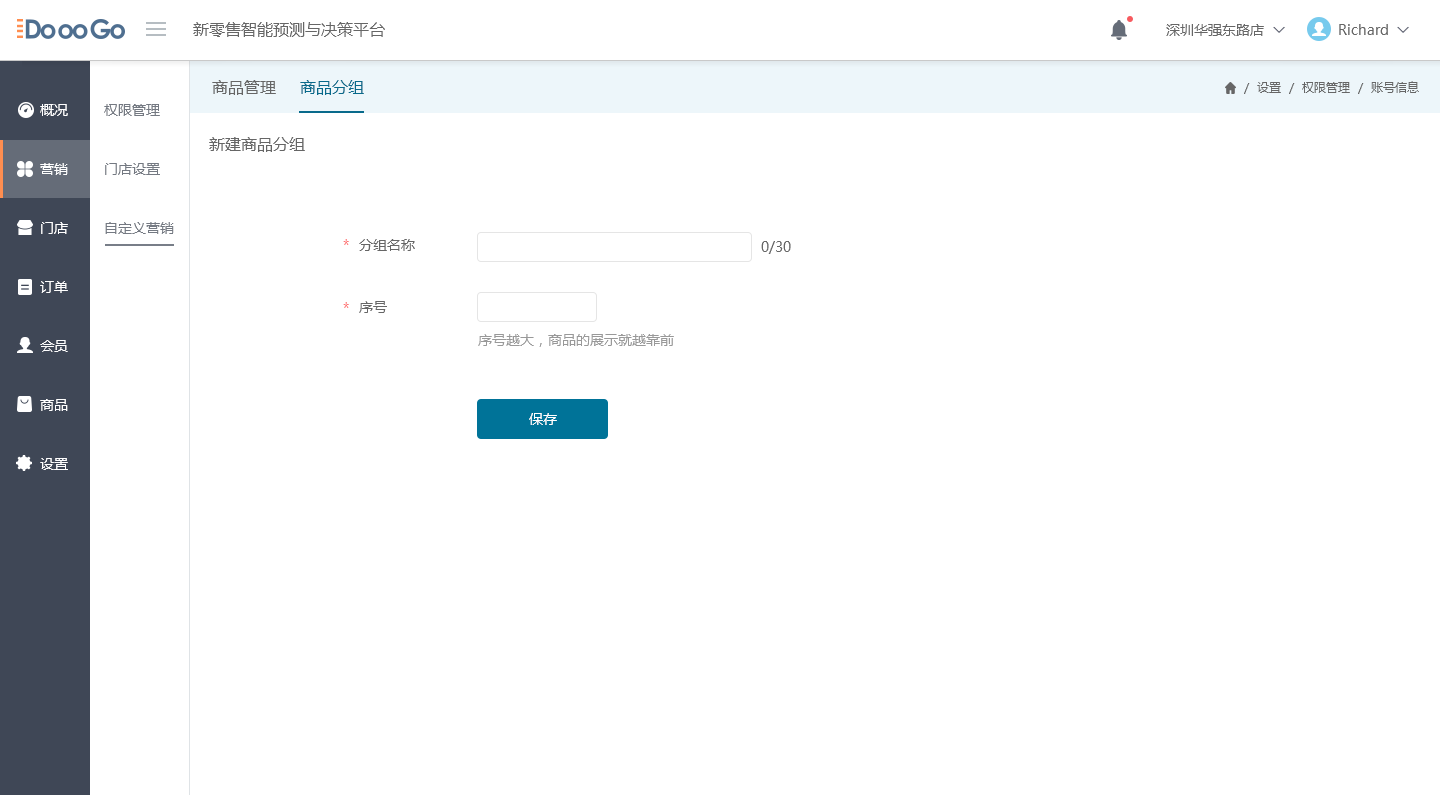
<style>
.page{position:relative;width:1440px;height:795px;background:#ffffff}
.page>*{position:absolute;margin:0}
.t1{font:16px "MicrosoftYaHeiUI";color:#666666}
.t2{font:14px "MicrosoftYaHeiUI";color:#666666}
.t3{font:14px "Marlett";color:#666666}
.t4{font:16px "MicrosoftYaHeiUI";color:#086a8b}
.t5{font:12px "MicrosoftYaHeiUI";color:#666666}
.t6{font:14px/59px "MicrosoftYaHeiUI";color:#ffffff}
.t7{font:14px/59px "MicrosoftYaHeiUI";color:#747982}
.t8{font:14px "MicrosoftYaHeiUI";color:#ff7474}
.t9{font:14px "MicrosoftYaHeiUI";color:#999999}
.t10{font:14px "MicrosoftYaHeiUI";color:#ffffff}
</style>
<div class="page">
<p class="t1" style="left:193px;top:22px;width:192px;height:15px">新零售智能预测与决策平台</p>
<p class="t2" style="left:1166px;top:24px;width:98px;height:12px">深圳华强东路店</p>
<p class="t2" style="left:1339px;top:24px;width:65px;height:11px">Richard <span class="t3">6</span></p>
<p class="t1" style="left:212px;top:80px;width:64px;height:15px">商品管理</p>
<p class="t4" style="left:300px;top:80px;width:64px;height:15px">商品分组</p>
<p class="t5" style="left:1244px;top:81px;width:175px;height:13px">/  设置  /  权限管理  /  账号信息</p>
<p class="t6" style="left:40px;top:104px;width:28px;height:366px">概况<br>营销<br>门店<br>订单<br>会员<br>商品<br>设置</p>
<p class="t7" style="left:104px;top:104px;width:70px;height:130px">权限管理<br>门店设置<br>自定义营销</p>
<p class="t1" style="left:209px;top:137px;width:96px;height:15px">新建商品分组</p>
<p class="t8" style="left:343px;top:239px;width:6px;height:6px">*</p>
<p class="t2" style="left:359px;top:239px;width:56px;height:12px">分组名称</p>
<p class="t2" style="left:761px;top:241px;width:30px;height:13px">0/30</p>
<p class="t8" style="left:343px;top:302px;width:6px;height:6px">*</p>
<p class="t2" style="left:359px;top:301px;width:28px;height:12px">序号</p>
<p class="t9" style="left:478px;top:334px;width:196px;height:13px">序号越大，商品的展示就越靠前</p>
<p class="t10" style="left:529px;top:413px;width:28px;height:12px">保存</p>
</div>
